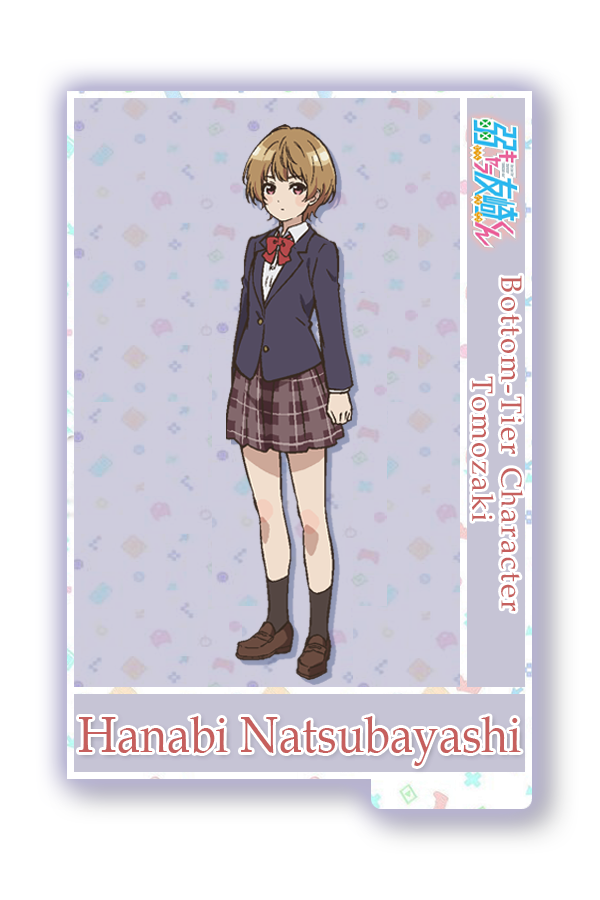
<style>
.page{position:relative;width:600px;height:900px;background:#ffffff}
.page>*{position:absolute;margin:0}
.t1{font:29.2px/29.2px "BookAntiqua";letter-spacing:0.08em;color:#c65f5d}
.t2{font:50px "BookAntiqua";color:#c65f5d;scale:0.92 1}
</style>
<div class="page">
<p class="t1" style="left:471px;top:275px;width:52px;height:336px;text-align:center;rotate:90deg">Bottom-Tier Character <br>Tomozaki</p>
<p class="t2" style="left:79px;top:716px;width:442px;height:50px">Hanabi Natsubayashi</p>
</div>
